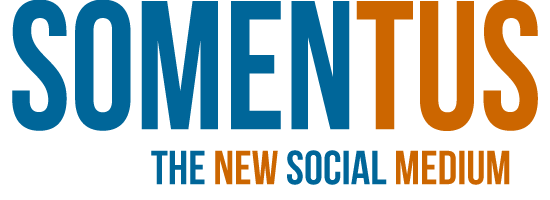
<style>
.page{position:relative;width:550px;height:200px;background:#ffffff}
.page>*{position:absolute;margin:0}
.t1{font:182.8px "BebasNeue";color:#006699;scale:0.9 1}
.t2{font:182.8px "BebasNeue";color:#cc6600;scale:0.9 1}
.t3{font:48px "BebasNeue";color:#006699}
.t4{font:48px "BebasNeue";color:#cc6600}
</style>
<div class="page">
<p class="t1" style="left:12px;top:0px;width:526px;height:131px">SOMEN<span class="t2">TUS</span></p>
<p class="t3" style="left:151px;top:150px;width:359px;height:35px">The <span class="t4">NEw </span>social <span class="t4">medium</span></p>
</div>
